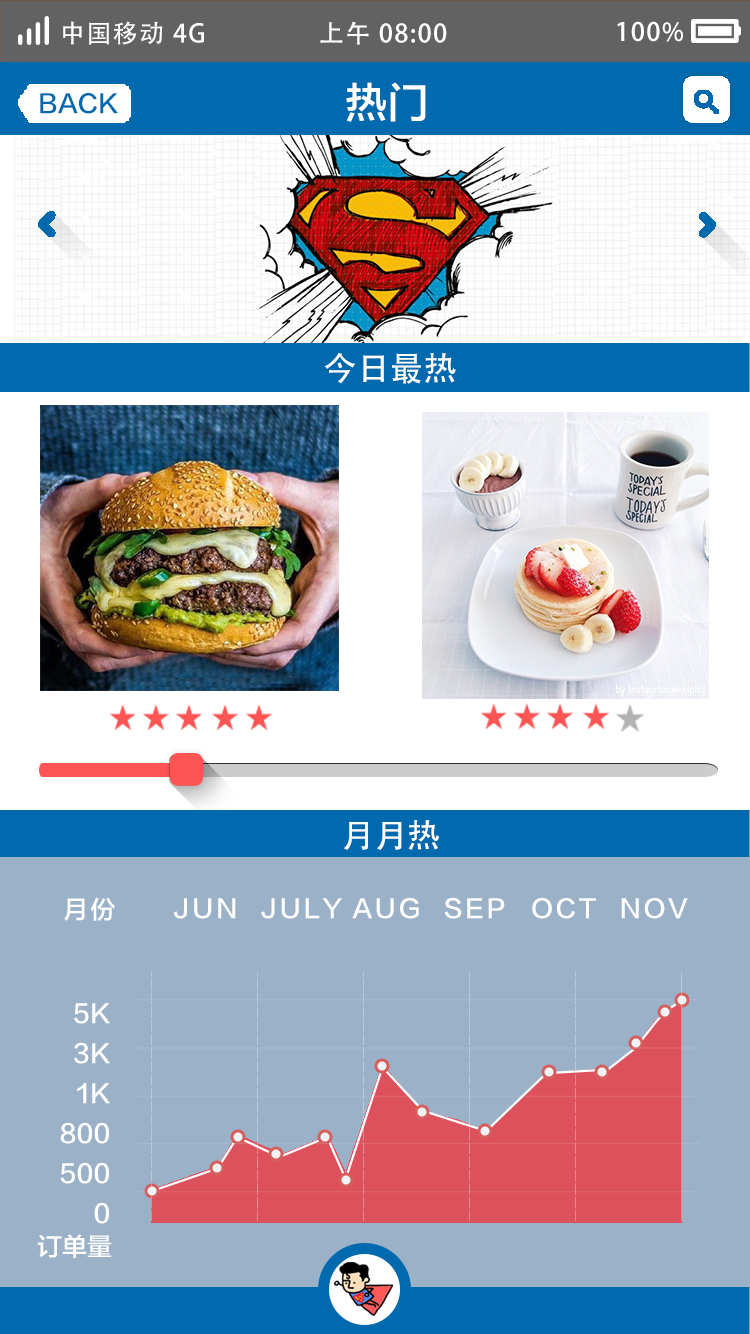
<style>
.page{position:relative;width:750px;height:1334px;background:#9bb1c8}
.page>*{position:absolute;margin:0}
.t1{font:25px "AdobeHeitiStd-Regular";letter-spacing:0.06em;color:#ffffff}
.t2{font:41.7px "FZLTZHK--GBK1-0";color:#ffffff;text-transform:uppercase}
.t3{font:25px "FZLTZHK--GBK1-0";color:#016aae;text-transform:uppercase}
.t4{font:33.3px "AdobeHeitiStd-Regular";color:#ffffff}
.t5{font:25px "FZLTZHK--GBK1-0";letter-spacing:0.1em;color:#ffffff;text-transform:uppercase}
.t6{font:25px "FZLTZHK--GBK1-0";color:#ffffff}
.t7{font:25px "FZLTZHK--GBK1-0";color:#ffffff;text-transform:uppercase}
</style>
<div class="page">
<p class="t1" style="left:63px;top:21px;width:141px;height:24px">中国移动 4G</p>
<p class="t1" style="left:320px;top:21px;width:127px;height:24px">上午 08:00</p>
<p class="t1" style="left:617px;top:21px;width:66px;height:21px">100%</p>
<p class="t2" style="left:346px;top:82px;width:80px;height:40px">热门</p>
<p class="t3" style="left:40px;top:92px;width:78px;height:22px">back</p>
<p class="t4" style="left:324px;top:353px;width:132px;height:31px">今日最热</p>
<p class="t4" style="left:343px;top:820px;width:97px;height:30px">月月热</p>
<p class="t5" style="left:64px;top:897px;width:51px;height:24px">月份</p>
<p class="t5" style="left:174px;top:898px;width:62px;height:21px">Jun</p>
<p class="t5" style="left:261px;top:898px;width:81px;height:21px">July</p>
<p class="t5" style="left:352px;top:897px;width:67px;height:22px">AUG</p>
<p class="t5" style="left:444px;top:897px;width:61px;height:22px">SEP</p>
<p class="t5" style="left:532px;top:897px;width:64px;height:22px">Oct</p>
<p class="t5" style="left:621px;top:897px;width:67px;height:22px">Nov</p>
<p class="t6" style="left:74px;top:1003px;width:36px;height:21px">5K</p>
<p class="t6" style="left:74px;top:1042px;width:36px;height:22px">3K</p>
<p class="t6" style="left:77px;top:1083px;width:33px;height:21px">1K</p>
<p class="t6" style="left:60px;top:1122px;width:49px;height:22px">800</p>
<p class="t6" style="left:60px;top:1162px;width:49px;height:22px">500</p>
<p class="t7" style="left:94px;top:1202px;width:15px;height:22px">0</p>
<p class="t7" style="left:37px;top:1234px;width:75px;height:24px">订单量</p>
</div>
